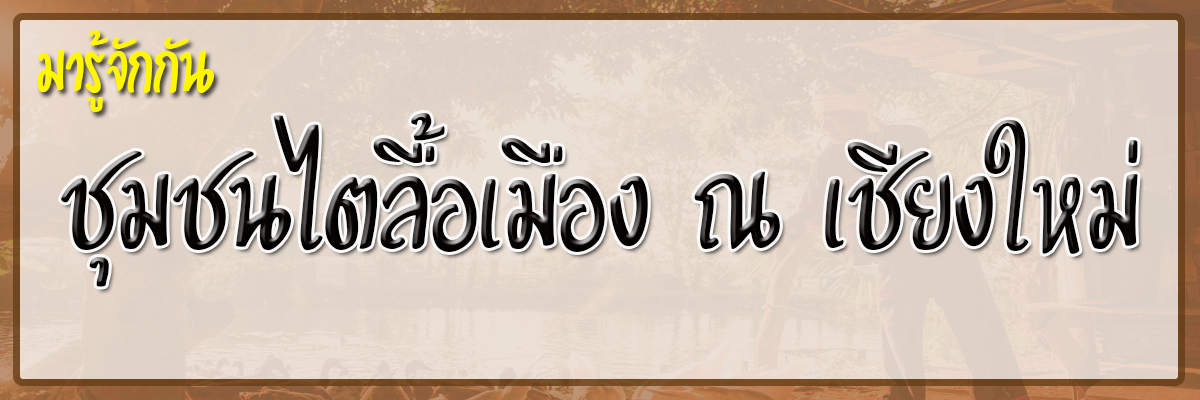
<style>
.page{position:relative;width:1200px;height:400px}
.page>*{position:absolute;margin:0}
.t1{font:100px "UID-SALMON-2019-";color:#fff600}
.t2{font:180px "UID-SALMON-2019-";color:#080401}
</style>
<div class="page">
<p class="t1" style="left:37px;top:30px;width:177px;height:82px">มารู้จักกัน</p>
<p class="t2" style="left:61px;top:112px;width:1077px;height:175px">ชุมชนไตลื้อเมือง ณ เชียงใหม่</p>
</div>
